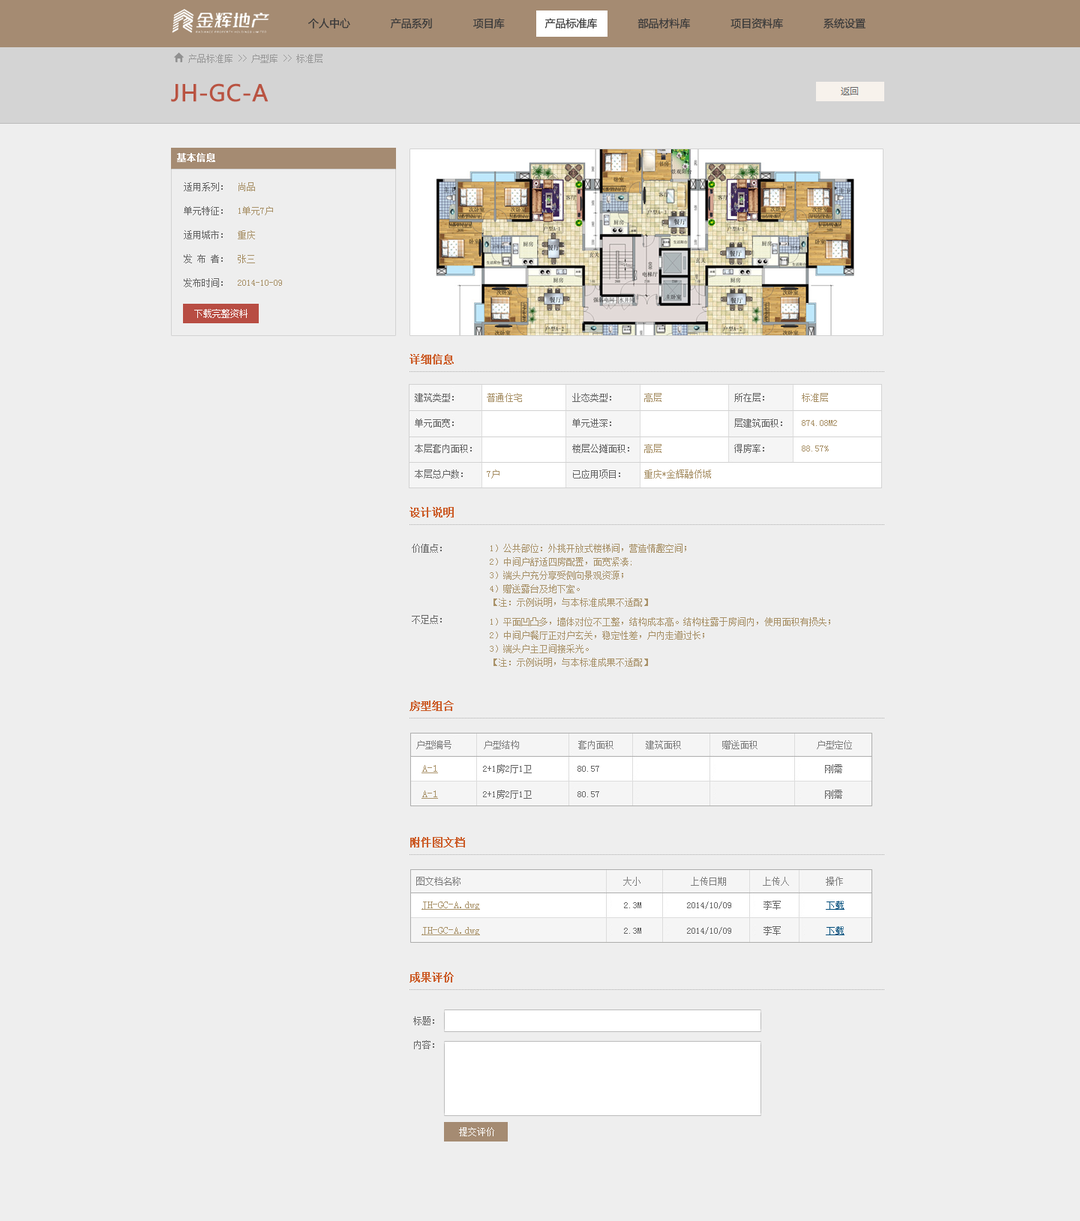
<style>
.page{position:relative;width:1080px;height:1221px;background:#eeeeee}
.page>*{position:absolute;margin:0}
.t1{font:10.5px "MicrosoftYaHei";color:#3c3c3c}
.t2{font:9px "SimSun";color:#999999}
.t3{font:22.5px "MicrosoftYaHei";color:#b95341;font-weight:bold}
.t4{font:9px "SimSun";color:#ffffff;font-weight:bold}
.t5{font:9px/24px "SimSun";color:#a99269}
.t6{font:9px/24px "SimSun";color:#666666}
.t7{font:9px "SimSun";color:#ffffff}
.t8{font:10.5px "SimSun";color:#cc5d29;font-weight:bold}
.t9{font:9px/25.5px "SimSun";color:#666666}
.t10{font:9px/25.5px "SimSun";color:#a99269}
.t11{font:9px "SimSun";color:#7f7f7f}
.t12{font:10.5px/25.5px "SimSun";color:#a99269;text-decoration:underline}
.t13{font:9px/25.5px "SimSun";color:#004d7b;text-decoration:underline}
</style>
<div class="page">
<p class="t1" style="left:308px;top:18px;width:558px;height:10px">个人中心             产品系列             项目库             产品标准库             部品材料库             项目资料库             系统设置</p>
<p class="t1" style="left:308px;top:18px;width:558px;height:10px">个人中心             产品系列             项目库             产品标准库             部品材料库             项目资料库             系统设置</p>
<p class="t2" style="left:188px;top:54px;width:134px;height:9px">产品标准库 &gt;&gt; 户型库 &gt;&gt; 标准层</p>
<p class="t3" style="left:171px;top:83px;width:97px;height:19px">JH-GC-A</p>
<p class="t4" style="left:177px;top:153px;width:38px;height:9px">基本信息</p>
<p class="t5" style="left:184px;top:182px;width:98px;height:105px"><span class="t6">适用系列：  </span>尚品<br><span class="t6">单元特征：  </span>1单元7户<br><span class="t6">适用城市：  </span>重庆<br><span class="t6">发 布 者：  </span>张三<br><span class="t6">发布时间：  </span>2014-10-09</p>
<p class="t7" style="left:194px;top:309px;width:54px;height:9px">下载完整资料</p>
<p class="t8" style="left:410px;top:354px;width:44px;height:10px">详细信息</p>
<p class="t9" style="left:415px;top:393px;width:422px;height:85px">建筑类型：      <span class="t10">普通住宅           </span>业态类型：      <span class="t10">高层                </span>所在层：       <span class="t10">标准层<br></span>单元面宽：                         单元进深：                          层建筑面积：   <span class="t10">874.08M2<br></span>本层套内面积：                     楼层公摊面积：  <span class="t10">高层                </span>得房率：       <span class="t10">88.57%<br></span>本层总户数：   <span class="t10"> 7户                </span>已应用项目：    <span class="t10">重庆*金辉融侨城</span></p>
<p class="t8" style="left:410px;top:507px;width:44px;height:11px">设计说明</p>
<p class="t8" style="left:410px;top:700px;width:44px;height:11px">房型组合</p>
<p class="t11" style="left:416px;top:740px;width:436px;height:9px">户型编号       户型结构             套内面积       建筑面积         赠送面积             户型定位</p>
<p class="t9" style="left:422px;top:764px;width:420px;height:35px"><span class="t12">A-1       </span>   2+1房2厅1卫          80.57                                                  刚需<br><span class="t12">A-1       </span>   2+1房2厅1卫          80.57                                                  刚需</p>
<p class="t8" style="left:410px;top:837px;width:55px;height:11px">附件图文档</p>
<p class="t11" style="left:416px;top:877px;width:427px;height:9px">图文档名称                                    大小           上传日期        上传人        操作</p>
<p class="t9" style="left:422px;top:901px;width:422px;height:34px"><span class="t12">JH-GC-A.dwg                             </span>   2.3M          2014/10/09       李军          <span class="t13">下载<br></span><span class="t12">JH-GC-A.dwg                </span>                2.3M          2014/10/09       李军          <span class="t13">下载</span></p>
<p class="t8" style="left:410px;top:972px;width:44px;height:10px">成果评价</p>
<p class="t6" style="left:413px;top:1016px;width:21px;height:33px">标题：<br>内容：</p>
<p class="t7" style="left:459px;top:1127px;width:35px;height:9px">提交评价</p>
</div>
